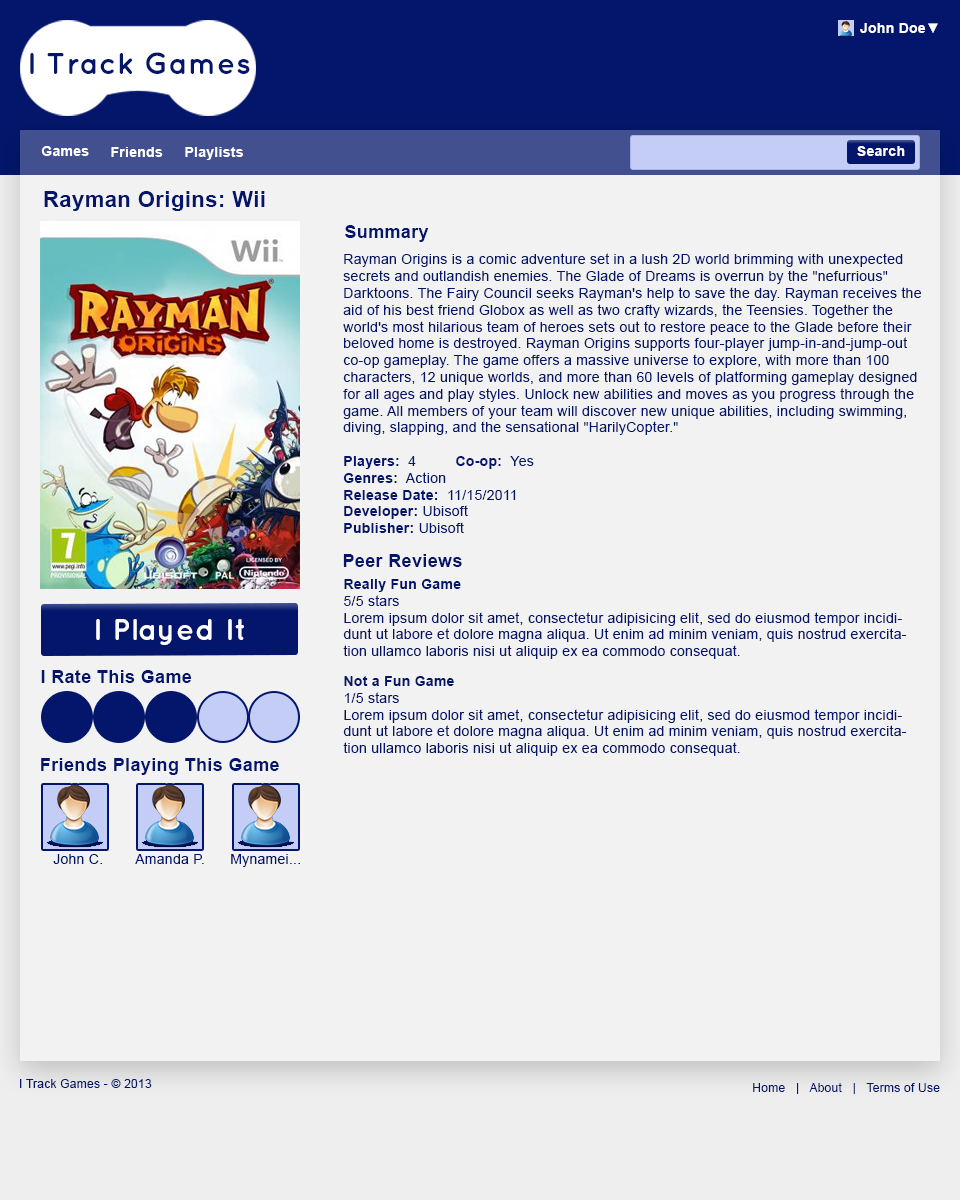
<style>
.page{position:relative;width:960px;height:1200px;background:#f2f2f2}
.page>*{position:absolute;margin:0}
.t1{font:14px "Arial-BoldMT";letter-spacing:0.02em;color:#ffffff}
.t2{font:30px "Quicksand-Bold";letter-spacing:0.02em;color:#03166b}
.t3{font:22px "Arial-BoldMT";letter-spacing:0.02em;color:#03166b}
.t4{font:18px "Arial-BoldMT";letter-spacing:0.02em;color:#03166b}
.t5{font:14px "ArialMT";letter-spacing:0.02em;color:#03166b}
.t6{font:14px "Arial-BoldMT";letter-spacing:0.02em;color:#03166b}
.t7{font:30px "Quicksand-Bold";letter-spacing:0.02em;color:#fefefe}
.t8{font:12px "ArialMT";letter-spacing:0.02em;color:#03166b}
</style>
<div class="page">
<p class="t1" style="left:860px;top:23px;width:78px;height:10px">John Doe▼</p>
<p class="t2" style="left:30px;top:52px;width:220px;height:22px">I Track Games</p>
<p class="t1" style="left:41px;top:146px;width:48px;height:10px">Games</p>
<p class="t1" style="left:111px;top:147px;width:52px;height:10px">Friends</p>
<p class="t1" style="left:185px;top:147px;width:58px;height:13px">Playlists</p>
<p class="t1" style="left:857px;top:146px;width:48px;height:10px">Search</p>
<p class="t3" style="left:44px;top:191px;width:221px;height:20px">Rayman Origins: Wii</p>
<p class="t4" style="left:345px;top:225px;width:84px;height:17px">Summary</p>
<p class="t5" style="left:343px;top:253px;width:578px;height:280px">Rayman Origins is a comic adventure set in a lush 2D world brimming with unexpected secrets and outlandish enemies. The Glade of Dreams is overrun by the "nefurrious" Darktoons. The Fairy Council seeks Rayman's help to save the day. Rayman receives the aid of his best friend Globox as well as two crafty wizards, the Teensies. Together the world's most hilarious team of heroes sets out to restore peace to the Glade before their beloved home is destroyed. Rayman Origins supports four-player jump-in-and-jump-out co-op gameplay. The game offers a massive universe to explore, with more than 100 characters, 12 unique worlds, and more than 60 levels of platforming gameplay designed for all ages and play styles. Unlock new abilities and moves as you progress through the game. All members of your team will discover new unique abilities, including swimming, diving, slapping, and the sensational "HarilyCopter."<br><br><span class="t6">Players: </span> 4 <span class="t6"> Co-op:</span>  Yes<br><span class="t6">Genres:</span>  Action<br><span class="t6">Release Date: </span> 11/15/2011<br><span class="t6">Developer: </span>Ubisoft<br><span class="t6">Publisher: </span>Ubisoft</p>
<p class="t4" style="left:343px;top:554px;width:119px;height:13px">Peer Reviews</p>
<p class="t5" style="left:343px;top:579px;width:564px;height:80px"><span class="t6">Really Fun Game<br></span>5/5 stars<br>Lorem ipsum dolor sit amet, consectetur adipisicing elit, sed do eiusmod tempor incididunt ut labore et dolore magna aliqua. Ut enim ad minim veniam, quis nostrud exercitation ullamco laboris nisi ut aliquip ex ea commodo consequat.</p>
<p class="t7" style="left:96px;top:619px;width:148px;height:26px">I Played It</p>
<p class="t4" style="left:41px;top:670px;width:151px;height:13px">I Rate This Game</p>
<p class="t5" style="left:343px;top:676px;width:564px;height:80px"><span class="t6">Not a Fun Game<br></span>1/5 stars<br>Lorem ipsum dolor sit amet, consectetur adipisicing elit, sed do eiusmod tempor incididunt ut labore et dolore magna aliqua. Ut enim ad minim veniam, quis nostrud exercitation ullamco laboris nisi ut aliquip ex ea commodo consequat.</p>
<p class="t4" style="left:41px;top:758px;width:238px;height:17px">Friends Playing This Game</p>
<p class="t5" style="left:53px;top:854px;width:49px;height:10px">John C.</p>
<p class="t5" style="left:135px;top:854px;width:69px;height:10px">Amanda P.</p>
<p class="t5" style="left:231px;top:854px;width:69px;height:13px">Mynamei...</p>
<p class="t8" style="left:20px;top:1079px;width:132px;height:9px">I Track Games - © 2013</p>
<p class="t8" style="left:753px;top:1083px;width:187px;height:11px">Home   |   About   |   Terms of Use</p>
</div>
